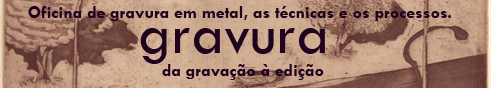
<style>
.page{position:relative;width:491px;height:88px}
.page>*{position:absolute;margin:0}
.t1{font:18px "TwCenMT-Bold";color:#1f031f}
.t2{font:60px "TwCenMT-Regular";color:#1f031f}
</style>
<div class="page">
<p class="t1" style="left:28px;top:6px;width:423px;height:15px">Oficina de gravura em metal, as técnicas e os processos.</p>
<p class="t2" style="left:140px;top:28px;width:185px;height:36px">gravura</p>
<p class="t1" style="left:162px;top:64px;width:162px;height:16px">da gravação à edição</p>
</div>
